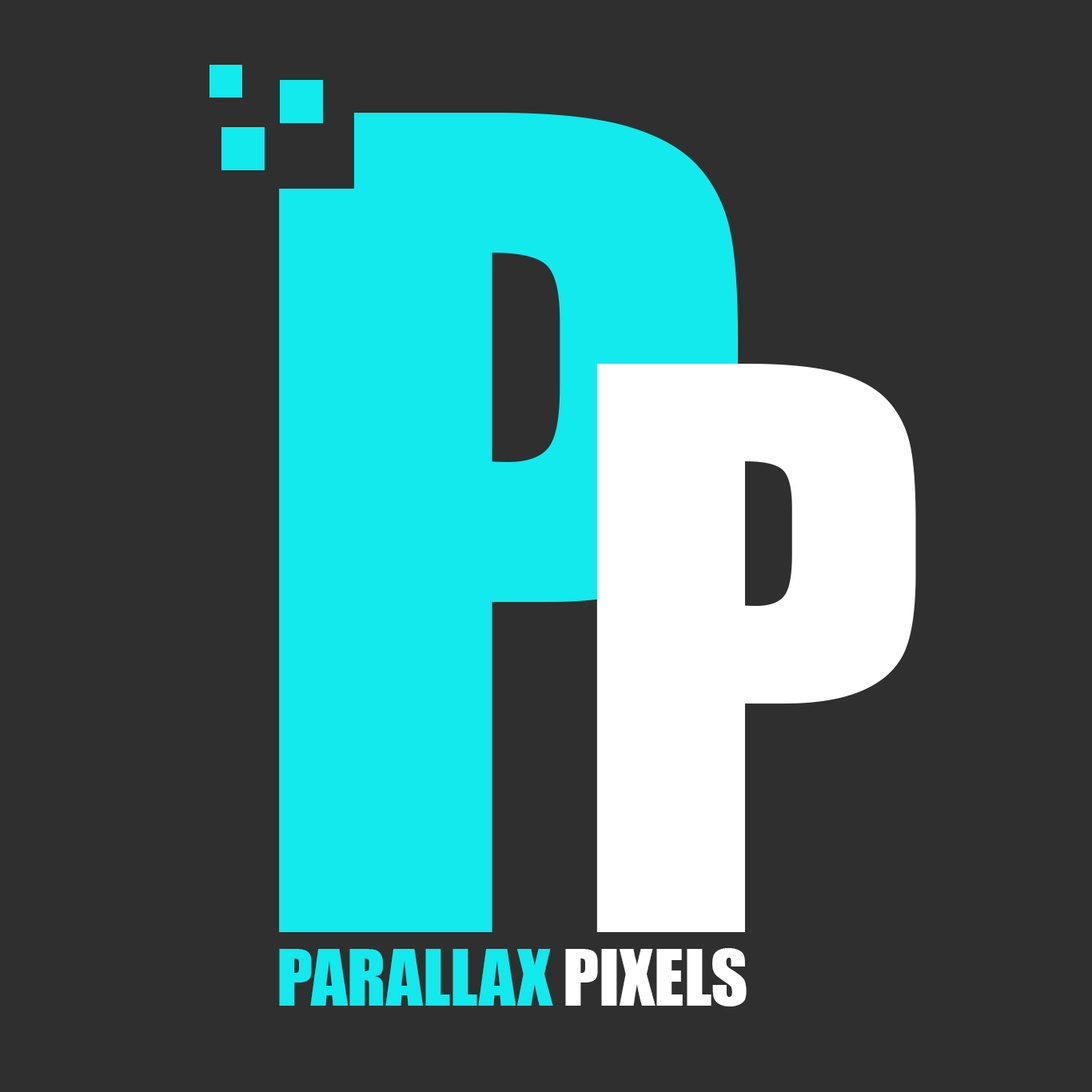
<style>
.page{position:relative;width:1092px;height:1092px;background:#2f2f2f}
.page>*{position:absolute;margin:0}
.t1{font:71.9px "Impact";color:#12eaed}
.t2{font:71.9px "Impact";color:#ffffff}
</style>
<div class="page">
<p class="t1" style="left:279px;top:949px;width:274px;height:57px">PARALLAX</p>
<p class="t2" style="left:565px;top:948px;width:182px;height:58px">PIXELS</p>
</div>
